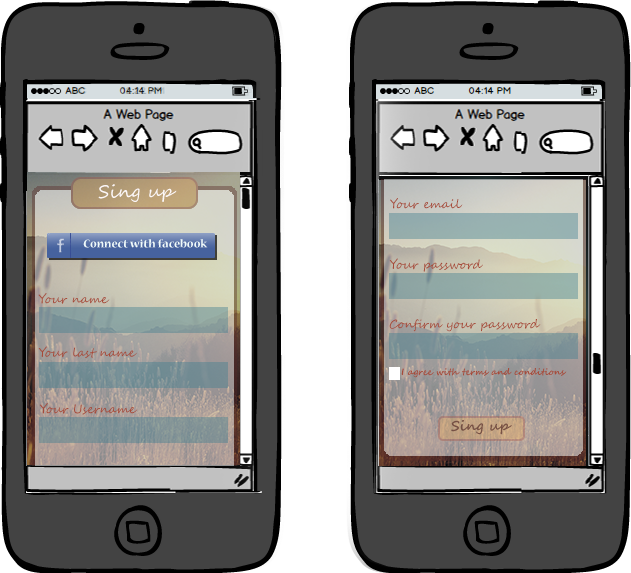
<style>
.page{position:relative;width:631px;height:573px;background:#434343}
.page>*{position:absolute;margin:0}
.t1{font:18px "SegoeScript";color:#fcf7f7}
.t2{font:12px "SegoeScript";color:#a74a38}
.t3{font:12px "NuevaStd-Bold";color:#f0fbfb}
.t4{font:9px "SegoeScript-Bold";color:#a74a38}
.t5{font:14px "SegoeScript-Bold";color:#785145}
</style>
<div class="page">
<p class="t1" style="left:98px;top:184px;width:79px;height:18px">Sing up</p>
<p class="t2" style="left:390px;top:198px;width:73px;height:11px">Your email</p>
<p class="t3" style="left:83px;top:239px;width:125px;height:9px">Connect with facebook</p>
<p class="t2" style="left:389px;top:258px;width:94px;height:14px">Your password</p>
<p class="t2" style="left:38px;top:293px;width:72px;height:11px">Your name</p>
<p class="t2" style="left:389px;top:319px;width:152px;height:13px">Confirm your password</p>
<p class="t2" style="left:38px;top:346px;width:99px;height:12px">Your last name</p>
<p class="t4" style="left:401px;top:368px;width:166px;height:10px">I agree with terms and conditions</p>
<p class="t2" style="left:39px;top:403px;width:99px;height:12px">Your Username</p>
<p class="t5" style="left:451px;top:420px;width:61px;height:15px">Sing up</p>
</div>
